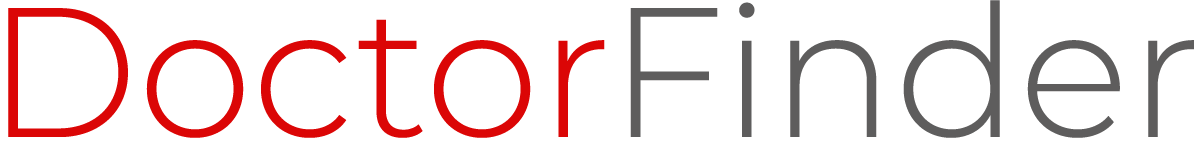
<style>
.page{position:relative;width:1200px;height:144px;background:#ffffff}
.page>*{position:absolute;margin:0}
.t1{font:184px "Montserrat-Light";color:#db0606}
.t2{font:184px "Montserrat-Light";color:#5e5d5d}
</style>
<div class="page">
<p class="t1" style="left:8px;top:0px;width:1186px;height:138px">Doctor<span class="t2">Finder</span></p>
</div>
